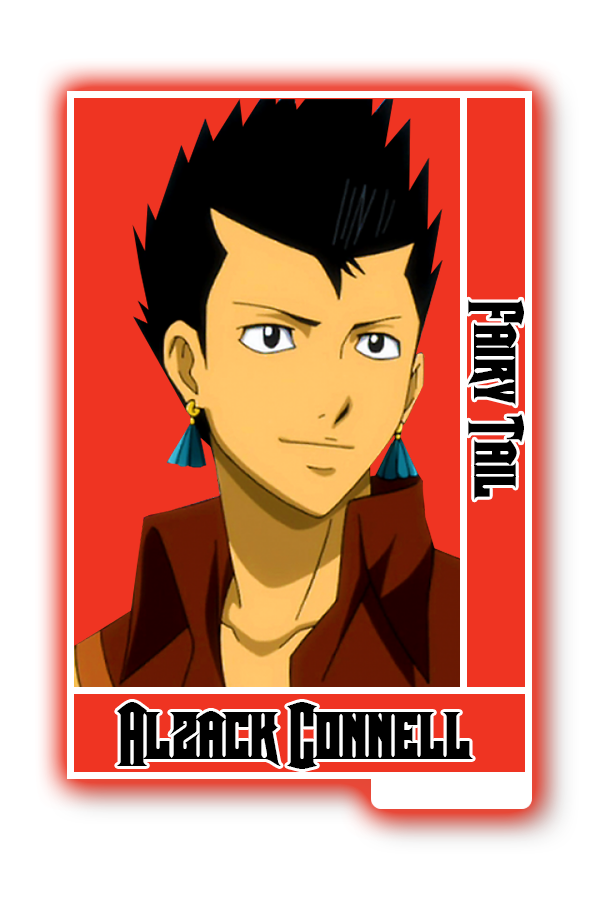
<style>
.page{position:relative;width:600px;height:900px;background:#ffffff}
.page>*{position:absolute;margin:0}
.t1{font:61.5px "Crown-Title";color:#000000}
.t2{font:70.1px "Crown-Title";color:#000000}
</style>
<div class="page">
<p class="t1" style="left:468px;top:299px;width:56px;height:201px;rotate:90deg">Fairy Tail</p>
<p class="t2" style="left:117px;top:702px;width:356px;height:67px">Alzack Connell</p>
</div>
